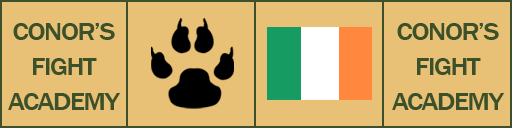
<style>
.page{position:relative;width:512px;height:128px;background:#e8c076}
.page>*{position:absolute;margin:0}
.t1{font:25.2px/5.8px "FranklinGothic-Medium";letter-spacing:-0.05em;color:#3c502a;scale:1.11 1}
</style>
<div class="page">
<p class="t1" style="left:8px;top:23px;width:112px;height:87px;text-align:center">CONOR’S<br><br><br><br><br><br>FIGHT<br><br><br><br><br><br>ACADEMY</p>
<p class="t1" style="left:392px;top:23px;width:112px;height:87px;text-align:center">CONOR’S<br><br><br><br><br><br>FIGHT<br><br><br><br><br><br>ACADEMY</p>
</div>
